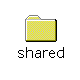
<style>
.page{position:relative;width:80px;height:80px;background:#ffffff}
.page>*{position:absolute;margin:0}
.t1{font:14px "MSReferenceSansSerif";color:#000000}
</style>
<div class="page">
<p class="t1" style="left:18px;top:47px;width:46px;height:11px">shared</p>
</div>
